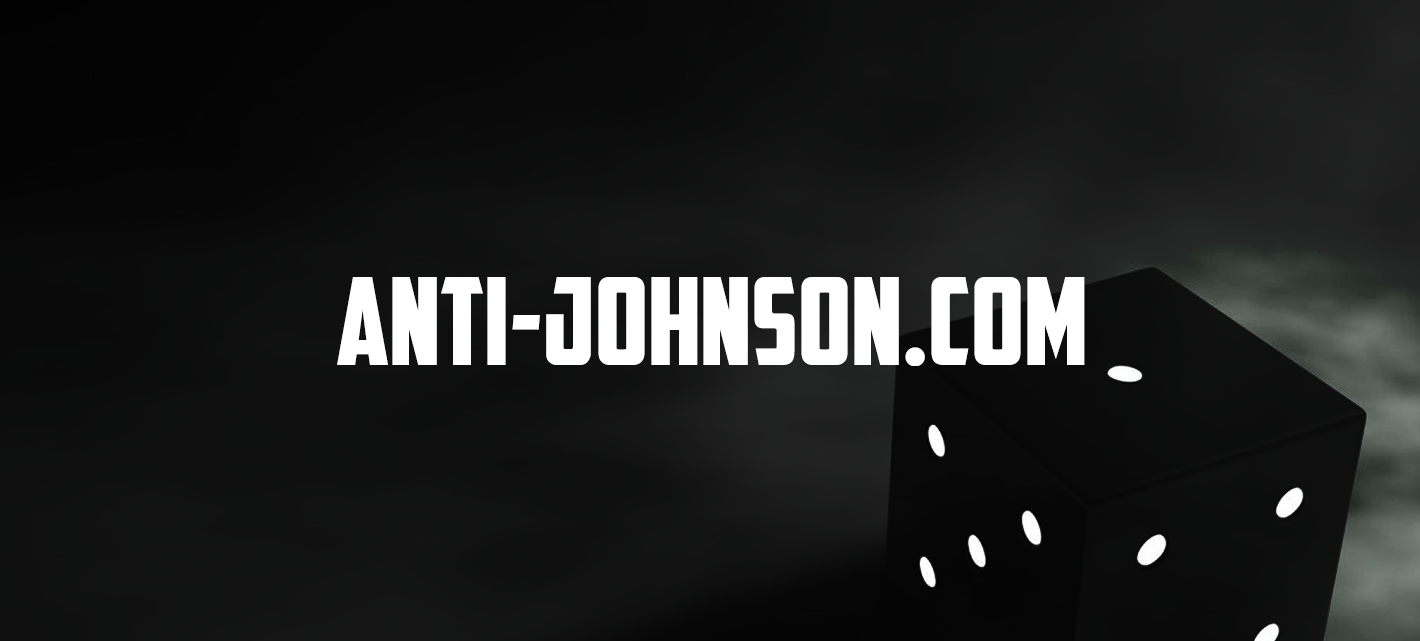
<style>
.page{position:relative;width:1420px;height:641px}
.page>*{position:absolute;margin:0}
.t1{font:121.4px "AmericanCaptain";color:#ffffff}
</style>
<div class="page">
<p class="t1" style="left:337px;top:277px;width:748px;height:89px">ANTI-JOHNSON.COM</p>
</div>
